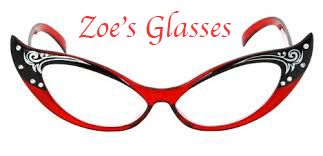
<style>
.page{position:relative;width:323px;height:156px;background:#ffffff}
.page>*{position:absolute;margin:0}
.t1{font:30px "Apple-Chancery";color:#f73434}
</style>
<div class="page">
<p class="t1" style="left:79px;top:11px;width:152px;height:34px">Zoe’s Glasses</p>
</div>
